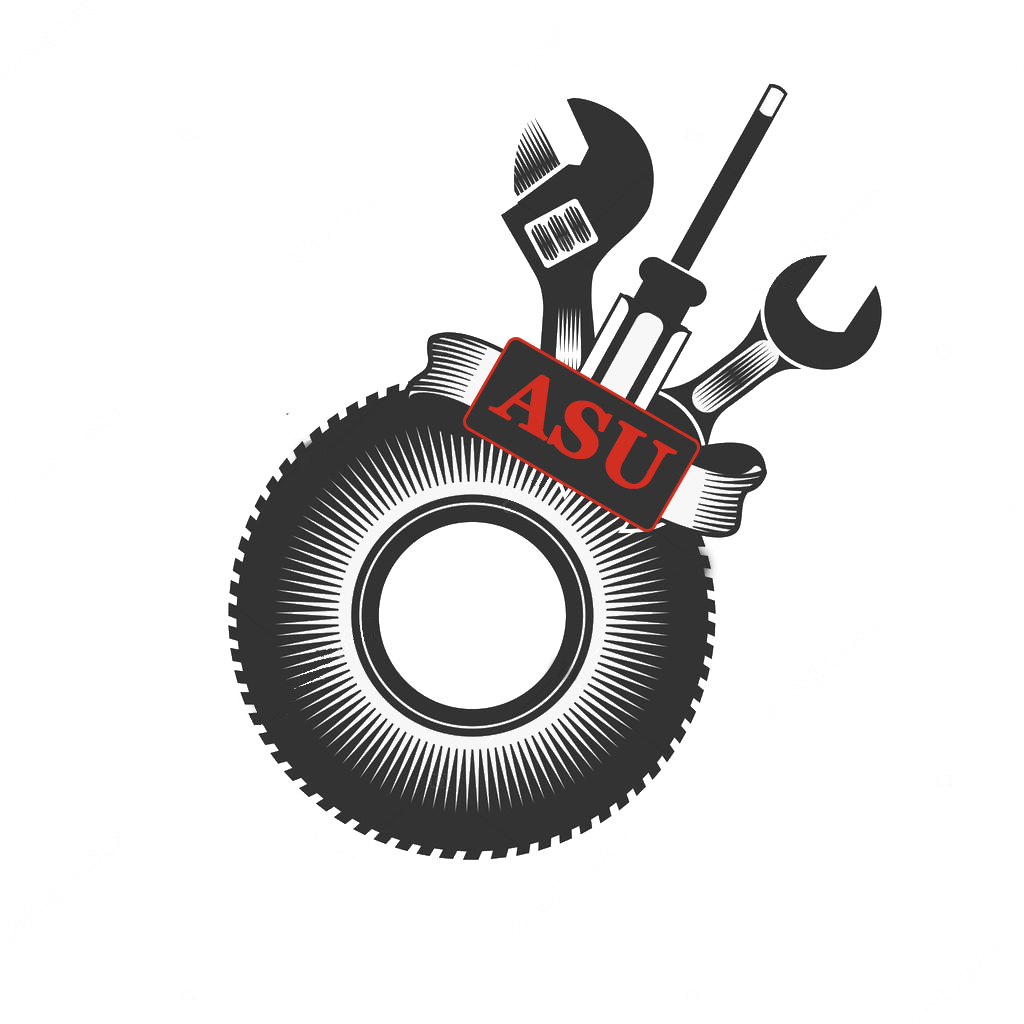
<style>
.page{position:relative;width:1024px;height:1024px;background:#ffffff}
.page>*{position:absolute;margin:0}
.t1{font:79px "Georgia-Bold";color:#d12f22;text-transform:uppercase;font-weight:bold}
</style>
<div class="page">
<p class="t1" style="left:488px;top:374px;width:190px;height:115px;rotate:29deg">asu</p>
</div>
